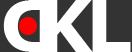
<style>
.page{position:relative;width:132px;height:52px;background:#ffffff}
.page>*{position:absolute;margin:0}
.t1{font:72px "Verdana-Bold";color:#ffffff}
</style>
<div class="page">
<p class="t1" style="left:3px;top:0px;width:51px;height:52px;rotate:180deg">D</p>
<p class="t1" style="left:43px;top:0px;width:50px;height:52px">K</p>
<p class="t1" style="left:92px;top:0px;width:39px;height:52px">L</p>
</div>
